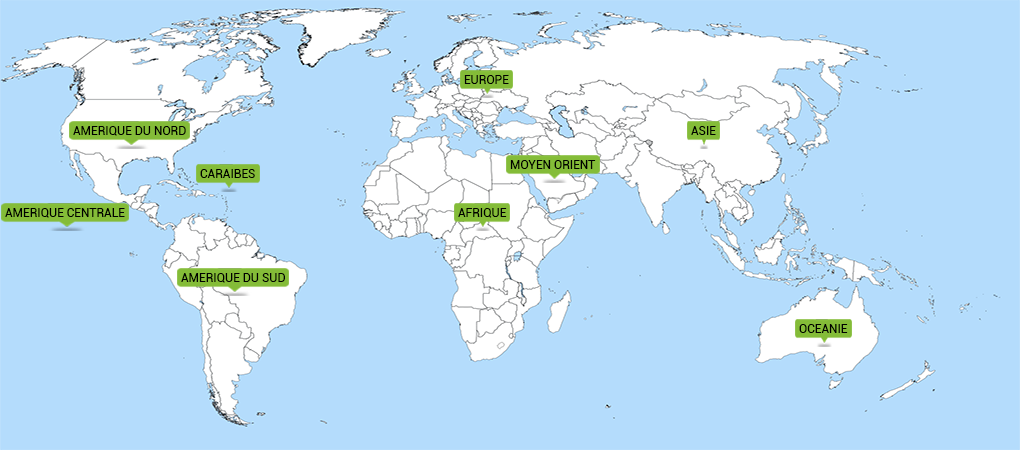
<style>
.page{position:relative;width:1020px;height:450px;background:#b4dcfc}
.page>*{position:absolute;margin:0}
.t1{font:12px "Roboto-Regular";color:#000000}
</style>
<div class="page">
<p class="t1" style="left:464px;top:75px;width:45px;height:9px">EUROPE</p>
<p class="t1" style="left:73px;top:126px;width:113px;height:10px">AMERIQUE DU NORD</p>
<p class="t1" style="left:510px;top:160px;width:86px;height:9px">MOYEN ORIENT</p>
<p class="t1" style="left:200px;top:169px;width:55px;height:9px">CARAIBES</p>
<p class="t1" style="left:5px;top:208px;width:120px;height:10px">AMERIQUE CENTRALE</p>
<p class="t1" style="left:458px;top:208px;width:49px;height:10px">AFRIQUE</p>
<p class="t1" style="left:181px;top:273px;width:104px;height:10px">AMERIQUE DU SUD</p>
<p class="t1" style="left:799px;top:324px;width:49px;height:9px">OCEANIE</p>
</div>
